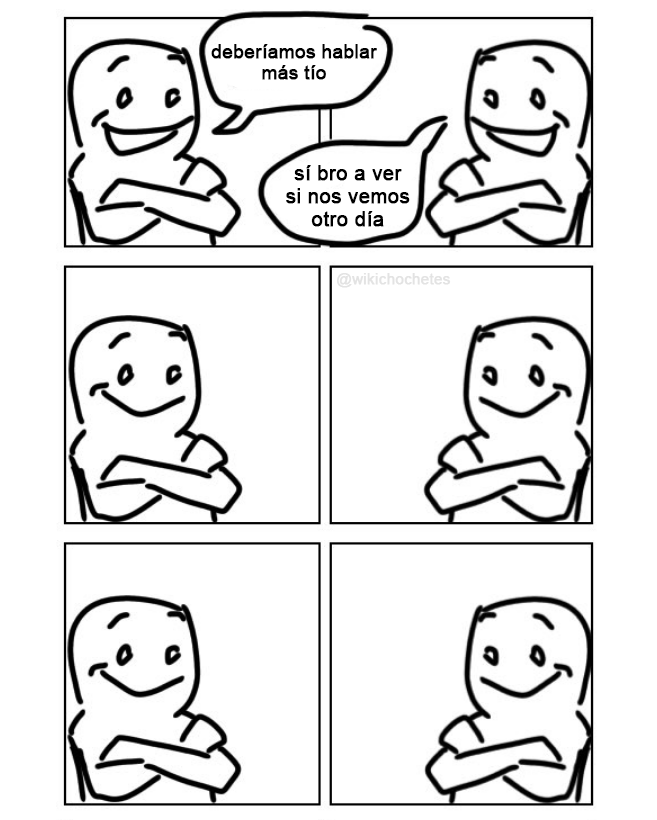
<style>
.page{position:relative;width:657px;height:820px;background:#ffffff}
.page>*{position:absolute;margin:0}
.t1{font:18.8px "ArialMT";color:#000000;font-weight:bold}
.t2{font:20.2px "ArialMT";color:#000000;font-weight:bold}
.t3{font:15px "ArialMT";color:#e3e3e3;font-weight:bold}
</style>
<div class="page">
<p class="t1" style="left:211px;top:44px;width:166px;height:36px;text-align:center">deberíamos hablar<br>más tío</p>
<p class="t2" style="left:286px;top:165px;width:124px;height:62px;text-align:center">sí bro a ver<br>si nos vemos<br>otro día</p>
<p class="t3" style="left:337px;top:273px;width:114px;height:15px">@wikichochetes</p>
</div>
